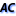
<style>
.page{position:relative;width:16px;height:16px;background:#ffffff}
.page>*{position:absolute;margin:0}
.t1{font:12.5px "MyriadPro-SemiboldIt";color:#000000}
</style>
<div class="page">
<p class="t1" style="left:0px;top:3px;width:15px;height:9px">AC</p>
</div>
